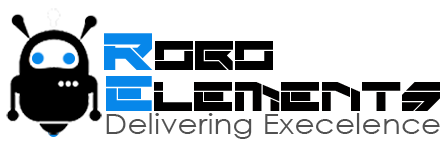
<style>
.page{position:relative;width:448px;height:160px;background:#ffffff}
.page>*{position:absolute;margin:0}
.t1{font:41.4px "Rektec";letter-spacing:0.02em;color:#010000}
.t2{font:52.4px "Rektec";letter-spacing:0.02em;color:#0787ea}
.t3{font:41.4px "Rektec";letter-spacing:0.02em;color:#000000}
.t4{font:49.7px "Rektec";letter-spacing:0.02em;color:#0787ea}
.t5{font:27.9px "CenturyGothic";color:#515151;scale:1.12 1}
</style>
<div class="page">
<p class="t1" style="left:104px;top:33px;width:336px;height:78px"><span class="t2">R</span><span class="t3">OBO<br> </span><span class="t4">E</span>LEMENTS</p>
<p class="t5" style="left:106px;top:113px;width:334px;height:26px">Delivering Execelence</p>
</div>
